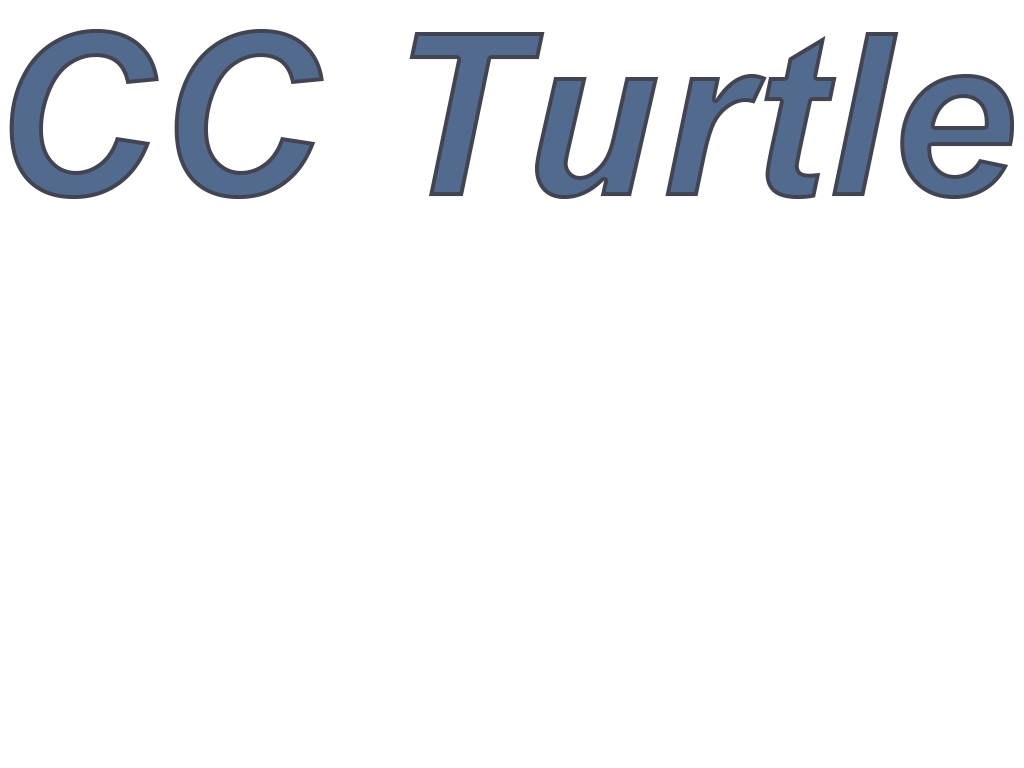
<style>
.page{position:relative;width:1024px;height:768px;background:#ffffff}
.page>*{position:absolute;margin:0}
.t1{font:228.9px "Arial-BoldItalicMT";color:#536a8f}
</style>
<div class="page">
<p class="t1" style="left:9px;top:29px;width:1006px;height:170px">CC Turtle</p>
</div>
